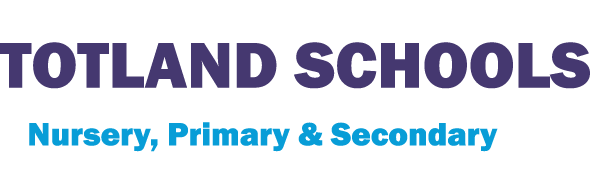
<style>
.page{position:relative;width:592px;height:179px;background:#ffffff}
.page>*{position:absolute;margin:0}
.t1{font:66.7px "FranklinGothic-Heavy";color:#453870}
.t2{font:33.3px "FranklinGothic-Heavy";color:#089dd7}
</style>
<div class="page">
<p class="t1" style="left:0px;top:42px;width:590px;height:47px">TOTLAND SCHOOLS</p>
<p class="t2" style="left:29px;top:122px;width:469px;height:30px">Nursery, Primary &amp; Secondary</p>
</div>
